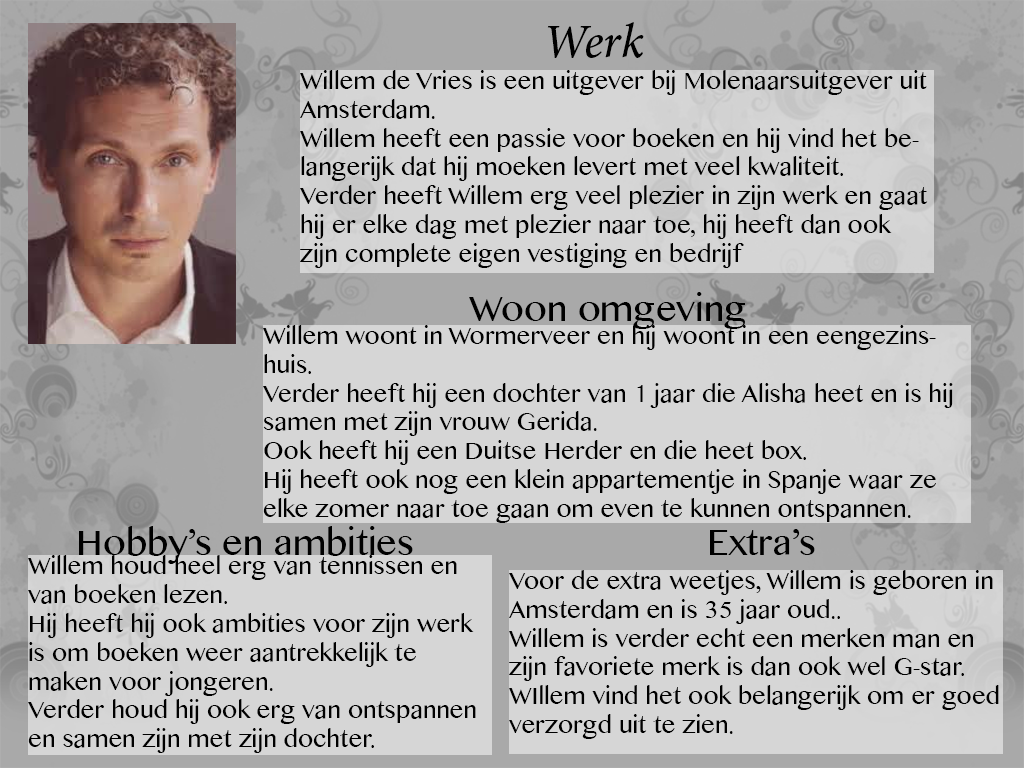
<style>
.page{position:relative;width:1024px;height:768px;background:#d6d6d6}
.page>*{position:absolute;margin:0}
.t1{font:48px "MinionPro-MediumIt";color:#000000}
.t2{font:24px "MalayalamMN";color:#000000}
.t3{font:36px "MalayalamMN";color:#000000}
</style>
<div class="page">
<p class="t1" style="left:547px;top:22px;width:97px;height:36px">Werk</p>
<p class="t2" style="left:300px;top:70px;width:628px;height:198px">Willem de Vries is een uitgever bij Molenaarsuitgever uit            Amsterdam.<br>Willem heeft een passie voor boeken en hij vind het belangerijk dat hij moeken levert met veel kwaliteit.<br>Verder heeft Willem erg veel plezier in zijn werk en gaat hij er elke dag met plezier naar toe, hij heeft dan ook zijn complete eigen vestiging en bedrijf</p>
<p class="t3" style="left:469px;top:292px;width:276px;height:37px">Woon omgeving</p>
<p class="t2" style="left:263px;top:325px;width:690px;height:198px">Willem woont in Wormerveer en hij woont in een eengezinshuis.<br>Verder heeft hij een dochter van 1 jaar die Alisha heet en is hij samen met zijn vrouw Gerida.<br>Ook heeft hij een Duitse Herder en die heet box.<br>Hij heeft ook nog een klein appartementje in Spanje waar ze elke zomer naar toe gaan om even te kunnen ontspannen.</p>
<p class="t3" style="left:79px;top:526px;width:334px;height:38px">Hobby’s en ambities</p>
<p class="t3" style="left:710px;top:529px;width:105px;height:26px">Extra’s</p>
<p class="t2" style="left:28px;top:555px;width:448px;height:198px">Willem houd heel erg van tennissen en van boeken lezen.<br>Hij heeft hij ook ambities voor zijn werk is om boeken weer aantrekkelijk te maken voor jongeren.<br>Verder houd hij ook erg van ontspannen en samen zijn met zijn dochter.</p>
<p class="t2" style="left:509px;top:570px;width:490px;height:169px">Voor de extra weetjes, Willem is geboren in Amsterdam en is 35 jaar oud..<br>Willem is verder echt een merken man en zijn favoriete merk is dan ook wel G-star.<br>WIllem vind het ook belangerijk om er goed verzorgd uit te zien.</p>
</div>
